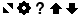
<style>
.page{position:relative;width:80px;height:16px;background:#ffffff}
.page>*{position:absolute;margin:0}
.t1{font:16.7px "HelveticaNeue-Medium";color:#000000}
</style>
<div class="page">
<p class="t1" style="left:36px;top:2px;width:8px;height:12px">?</p>
</div>
